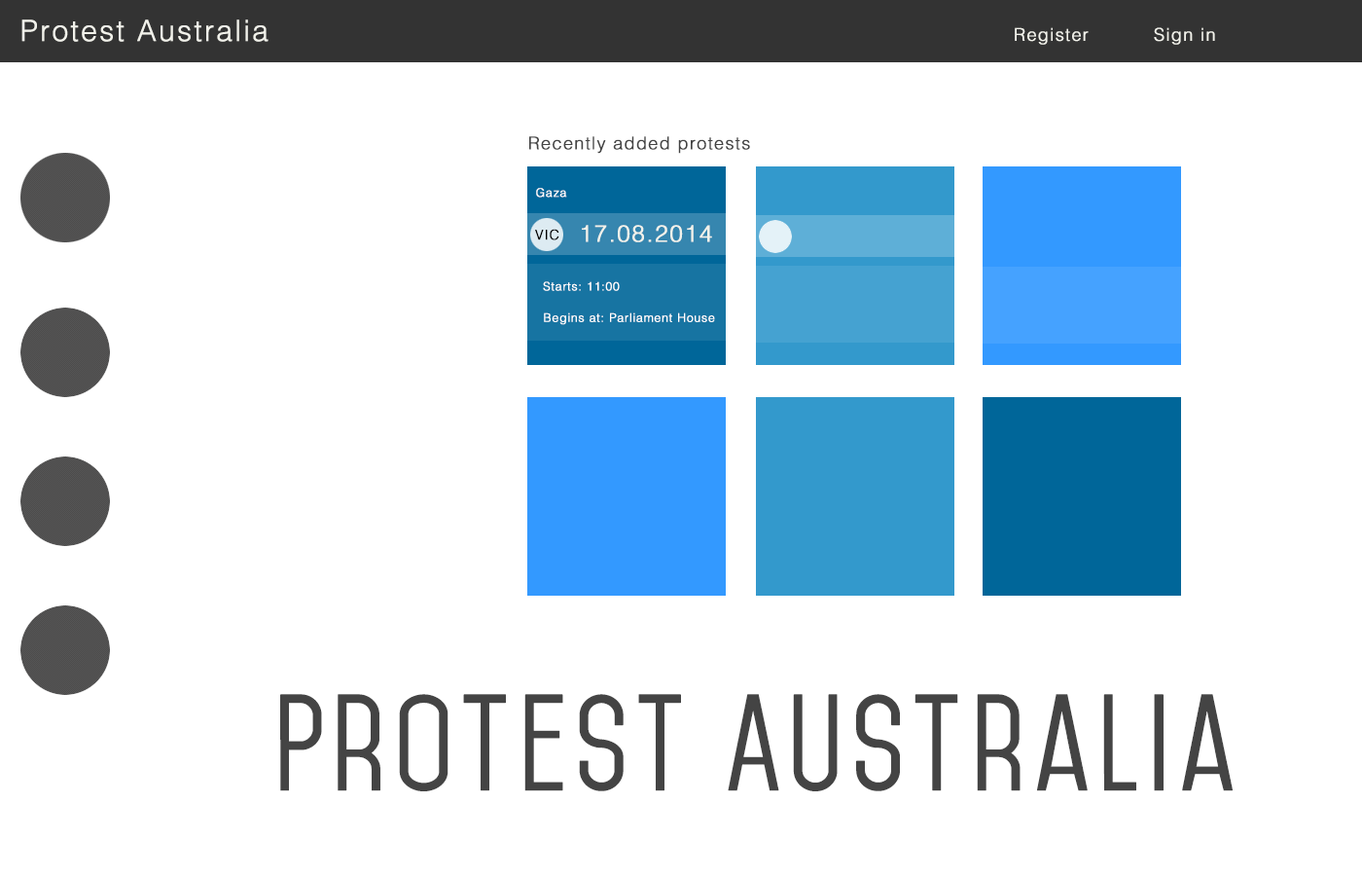
<style>
.page{position:relative;width:1362px;height:876px;background:#ffffff}
.page>*{position:absolute;margin:0}
.t1{font:29.2px "Helvetica-Light";letter-spacing:0.05em;color:#f2f2eb;font-weight:bold}
.t2{font:17.5px "Helvetica-Light";letter-spacing:0.05em;color:#f2f2eb;font-weight:bold}
.t3{font:17.5px "Helvetica-Light";letter-spacing:0.05em;color:#444444;font-weight:bold}
.t4{font:11.7px "Helvetica-Light";letter-spacing:0.05em;color:#ffffff;font-weight:bold}
.t5{font:13.6px "Helvetica-Light";letter-spacing:0.05em;color:#000000;font-weight:bold}
.t6{font:23.3px "Helvetica-Light";letter-spacing:0.05em;color:#f2f2eb;font-weight:bold}
.t7{font:116.7px "Mohave";letter-spacing:0.05em;color:#444444;font-weight:bold}
</style>
<div class="page">
<p class="t1" style="left:21px;top:19px;width:247px;height:23px">Protest Australia</p>
<p class="t2" style="left:1015px;top:27px;width:200px;height:18px">Register  Sign in</p>
<p class="t3" style="left:529px;top:136px;width:221px;height:18px">Recently added protests</p>
<p class="t4" style="left:536px;top:188px;width:31px;height:9px">Gaza</p>
<p class="t5" style="left:535px;top:229px;width:24px;height:11px">VIC</p>
<p class="t6" style="left:582px;top:225px;width:130px;height:17px">17.08.2014</p>
<p class="t4" style="left:543px;top:281px;width:77px;height:10px">Starts: 11:00</p>
<p class="t4" style="left:544px;top:312px;width:171px;height:13px">Begins at: Parliament House</p>
<p class="t7" style="left:280px;top:694px;width:953px;height:97px">Protest Australia</p>
</div>
